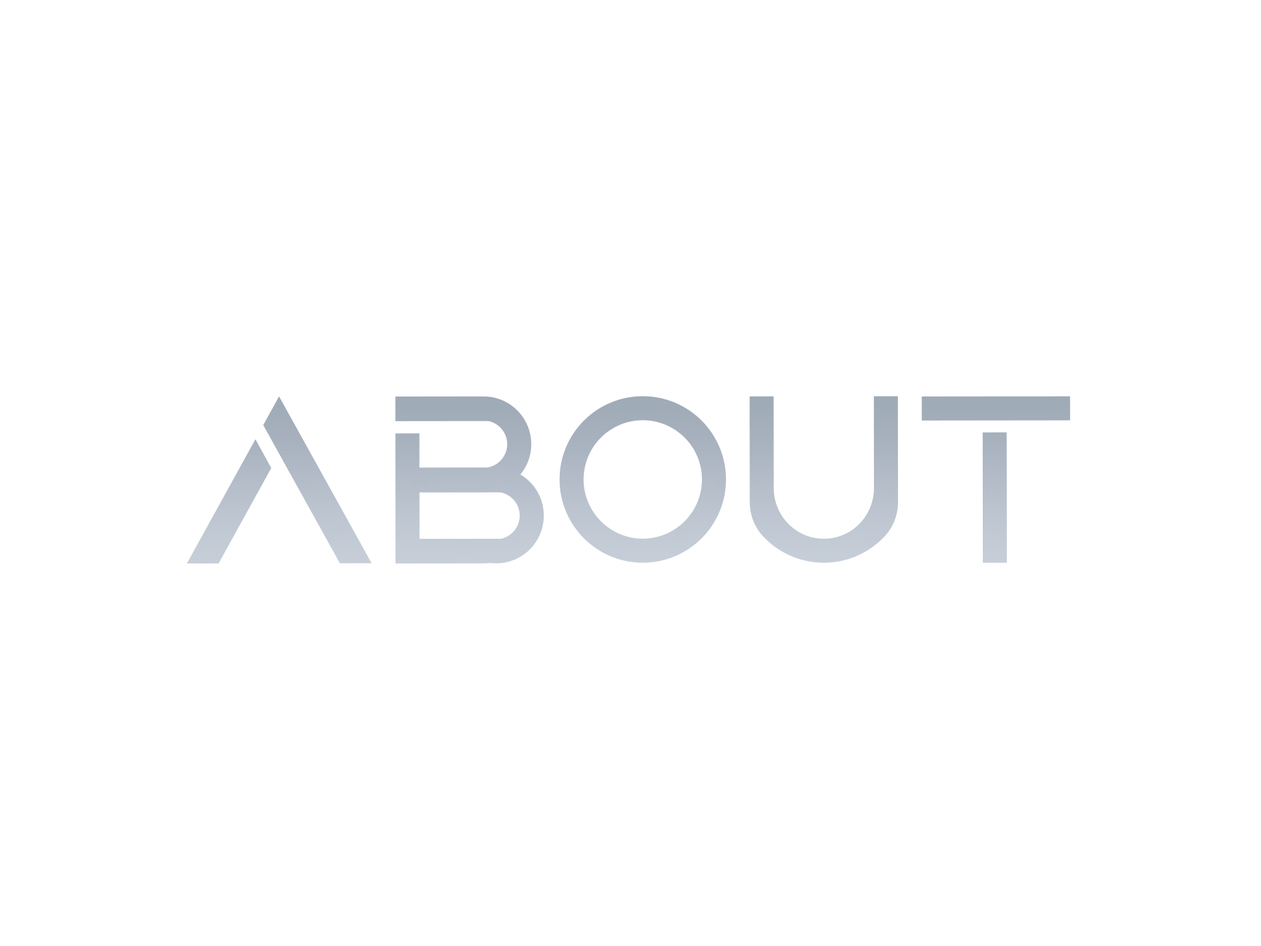
<style>
.page{position:relative;width:1261px;height:946px;background:#ffffff}
.page>*{position:absolute;margin:0}
.t1{font:250.2px "AquireRegular";color:#b3bdc8}
</style>
<div class="page">
<p class="t1" style="left:187px;top:396px;width:883px;height:167px">ABOUT</p>
</div>
